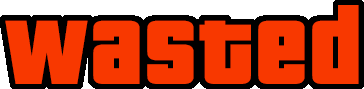
<style>
.page{position:relative;width:364px;height:89px;background:#f83800}
.page>*{position:absolute;margin:0}
.t1{font:99px "PricedownBl-Regular";letter-spacing:0.03em;color:#f83800}
</style>
<div class="page">
<p class="t1" style="left:5px;top:5px;width:354px;height:79px">wasted</p>
</div>
